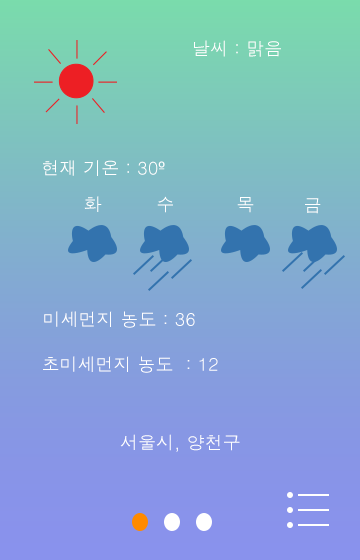
<style>
.page{position:relative;width:360px;height:560px}
.page>*{position:absolute;margin:0}
.t1{font:18px "Dotum";color:#ffffff}
</style>
<div class="page">
<p class="t1" style="left:194px;top:40px;width:87px;height:17px">날씨 : 맑음</p>
<p class="t1" style="left:43px;top:160px;width:122px;height:16px">현재 기온 : 30º</p>
<p class="t1" style="left:84px;top:196px;width:18px;height:16px">화</p>
<p class="t1" style="left:157px;top:196px;width:16px;height:17px">수</p>
<p class="t1" style="left:237px;top:197px;width:17px;height:16px">목</p>
<p class="t1" style="left:305px;top:198px;width:16px;height:16px">금</p>
<p class="t1" style="left:44px;top:311px;width:151px;height:17px">미세먼지 농도 : 36</p>
<p class="t1" style="left:43px;top:356px;width:175px;height:17px">초미세먼지 농도  : 12</p>
<p class="t1" style="left:120px;top:434px;width:120px;height:18px">서울시, 양천구</p>
</div>
